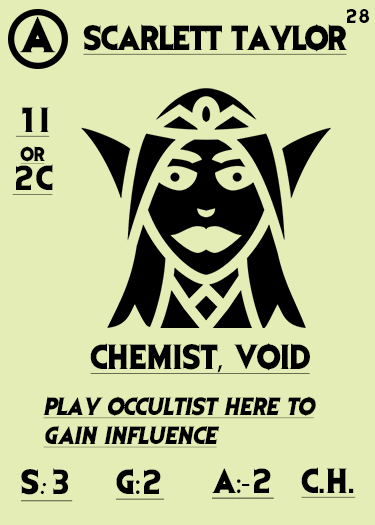
<style>
.page{position:relative;width:375px;height:525px;background:#e3edb5}
.page>*{position:absolute;margin:0}
.t1{font:41.7px "EvilDead";letter-spacing:-0.05em;color:#000000}
.t2{font:16.7px "EvilDead";letter-spacing:-0.05em;color:#000000}
.t3{font:29.2px "EvilDead";letter-spacing:-0.025em;color:#000000;text-decoration:underline}
.t4{font:29.2px/29.2px "EvilDead";color:#000000;text-decoration:underline}
.t5{font:16.7px/29.2px "EvilDead";color:#000000;text-decoration:underline}
.t6{font:29.2px "EvilDead";color:#000000;text-decoration:underline}
.t7{font:29.2px "MyriadPro-Regular";color:#000000;text-decoration:underline}
.t8{font:20.8px/29.2px "EvilDead";color:#000000;font-style:italic;text-decoration:underline}
.t9{font:29.2px "Fadli-Script";color:#000000;text-decoration:underline}
</style>
<div class="page">
<p class="t1" style="left:19px;top:16px;width:37px;height:37px">A</p>
<p class="t2" style="left:347px;top:9px;width:23px;height:14px">28</p>
<p class="t3" style="left:83px;top:24px;width:265px;height:31px">SCARLETT TAYLOR</p>
<p class="t4" style="left:12px;top:107px;width:41px;height:88px;text-align:center">1I<br><span class="t5">or<br></span>2C</p>
<p class="t6" style="left:90px;top:343px;width:220px;height:31px">CHEMIST<span class="t7">,</span> VOID</p>
<p class="t8" style="left:43px;top:396px;width:273px;height:52px">Play occultist here to<br>gain influence</p>
<p class="t6" style="left:21px;top:468px;width:52px;height:34px">S<span class="t9">:</span>3</p>
<p class="t6" style="left:116px;top:468px;width:49px;height:32px">G<span class="t7">:</span>2</p>
<p class="t7" style="left:211px;top:468px;width:63px;height:31px"><span class="t6">A</span>:-<span class="t6">2</span></p>
<p class="t6" style="left:301px;top:467px;width:55px;height:31px">C.H.</p>
</div>
